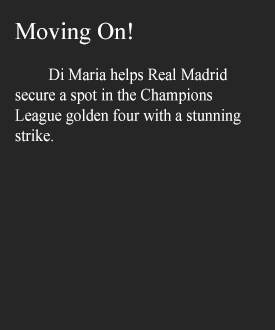
<style>
.page{position:relative;width:275px;height:330px;background:#262626}
.page>*{position:absolute;margin:0}
.t1{font:24px "TimesNewRomanPSMT";color:#ffffff}
.t2{font:17px "TimesNewRomanPSMT";color:#ffffff;scale:0.93 1}
</style>
<div class="page">
<p class="t1" style="left:15px;top:22px;width:117px;height:23px">Moving On!</p>
<p class="t2" style="left:15px;top:68px;width:226px;height:74px">Di Maria helps Real Madrid <br>secure a spot in the Champions <br>League golden four with a stunning <br>strike.</p>
</div>
